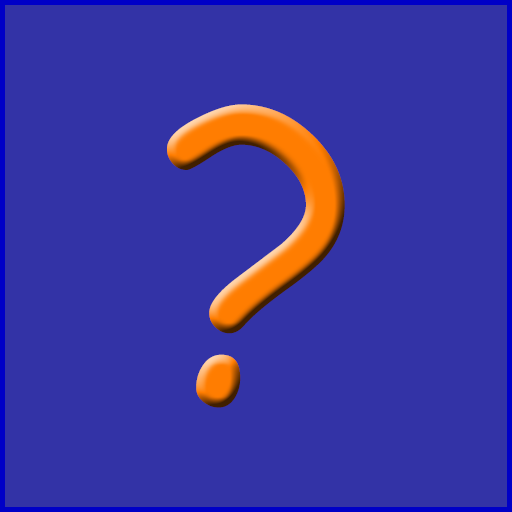
<style>
.page{position:relative;width:512px;height:512px;background:#3333a6}
.page>*{position:absolute;margin:0}
.t1{font:400px "ComicSansMS"}
</style>
<div class="page">
<p class="t1" style="left:167px;top:104px;width:178px;height:304px">?</p>
</div>
